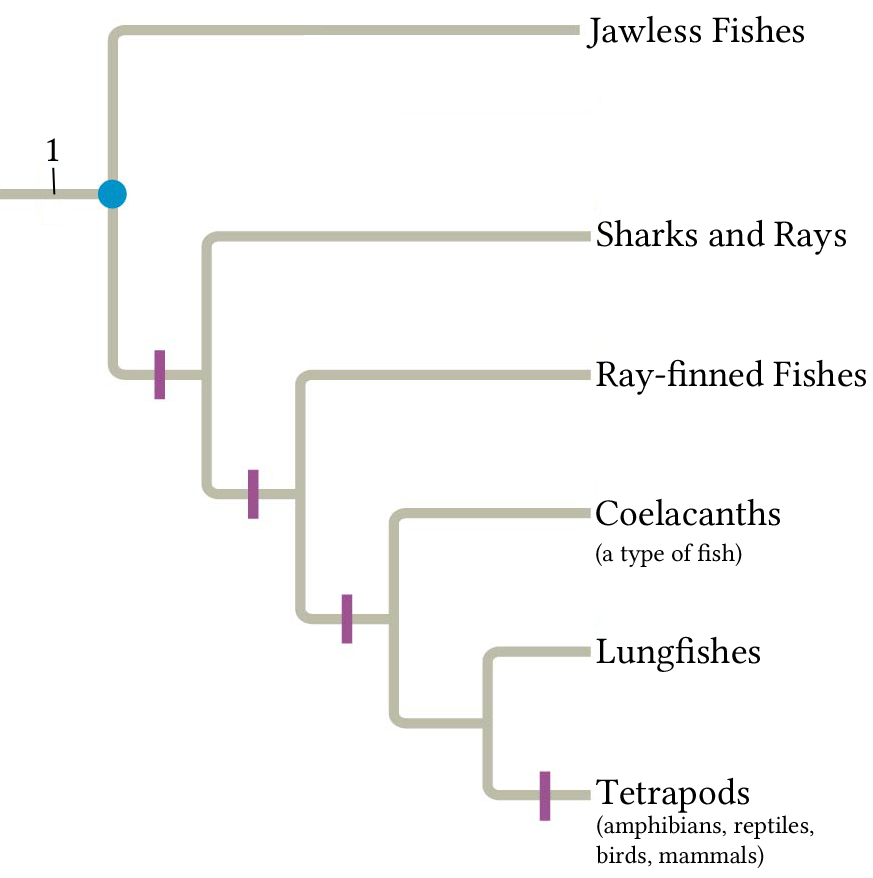
<style>
.page{position:relative;width:873px;height:878px;background:#ffffff}
.page>*{position:absolute;margin:0}
.t1{font:37.5px "LinLibertineO";color:#000000}
.t2{font:25px "LinLibertineO";color:#000000}
</style>
<div class="page">
<p class="t1" style="left:586px;top:15px;width:218px;height:34px">Jawless Fishes</p>
<p class="t1" style="left:47px;top:138px;width:12px;height:23px">1</p>
<p class="t1" style="left:597px;top:219px;width:249px;height:36px">Sharks and Rays</p>
<p class="t1" style="left:596px;top:359px;width:270px;height:36px">Ray-finned Fishes</p>
<p class="t1" style="left:596px;top:498px;width:184px;height:28px">Coelacanths</p>
<p class="t2" style="left:596px;top:543px;width:146px;height:24px">(a type of fish)</p>
<p class="t1" style="left:596px;top:636px;width:164px;height:36px">Lungfishes</p>
<p class="t1" style="left:596px;top:777px;width:153px;height:36px">Tetrapods</p>
<p class="t2" style="left:596px;top:815px;width:218px;height:53px">(amphibians, reptiles,<br>birds, mammals)</p>
</div>
